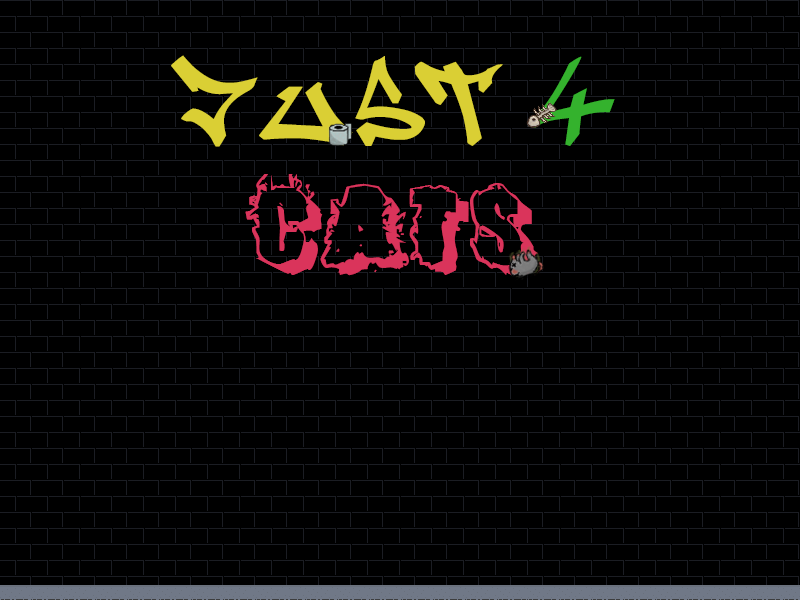
<style>
.page{position:relative;width:800px;height:600px;background:#000000}
.page>*{position:absolute;margin:0}
.t1{font:100px "Graffiti";color:#dacf34}
.t2{font:100px "Graffiti";color:#34b22d}
.t3{font:100px "Catch22";color:#da345b}
</style>
<div class="page">
<p class="t1" style="left:171px;top:55px;width:444px;height:221px;text-align:center">Just <span class="t2">4 </span><span class="t3">cats</span></p>
</div>
